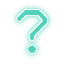
<style>
.page{position:relative;width:64px;height:64px;background:#ffffff}
.page>*{position:absolute;margin:0}
.t1{font:64px "BOCDMonoMedium";color:#53d1ba}
</style>
<div class="page">
<p class="t1" style="left:15px;top:9px;width:34px;height:46px">?</p>
</div>
